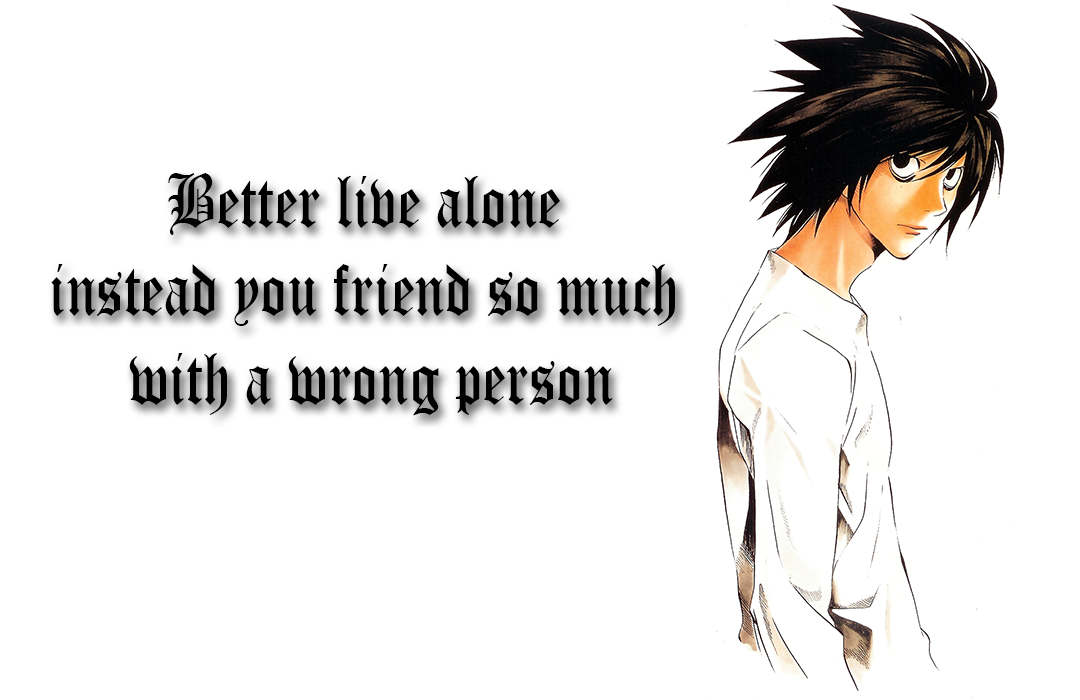
<style>
.page{position:relative;width:1080px;height:700px;background:#ffffff}
.page>*{position:absolute;margin:0}
.t1{font:26.6px "OldEnglishTextMT";color:#000000;scale:0.81 1}
</style>
<div class="page">
<p class="t1" style="left:51px;top:173px;width:624px;height:243px;text-align:center">Better live alone <br>instead you friend so much <br>with a wrong person</p>
</div>
